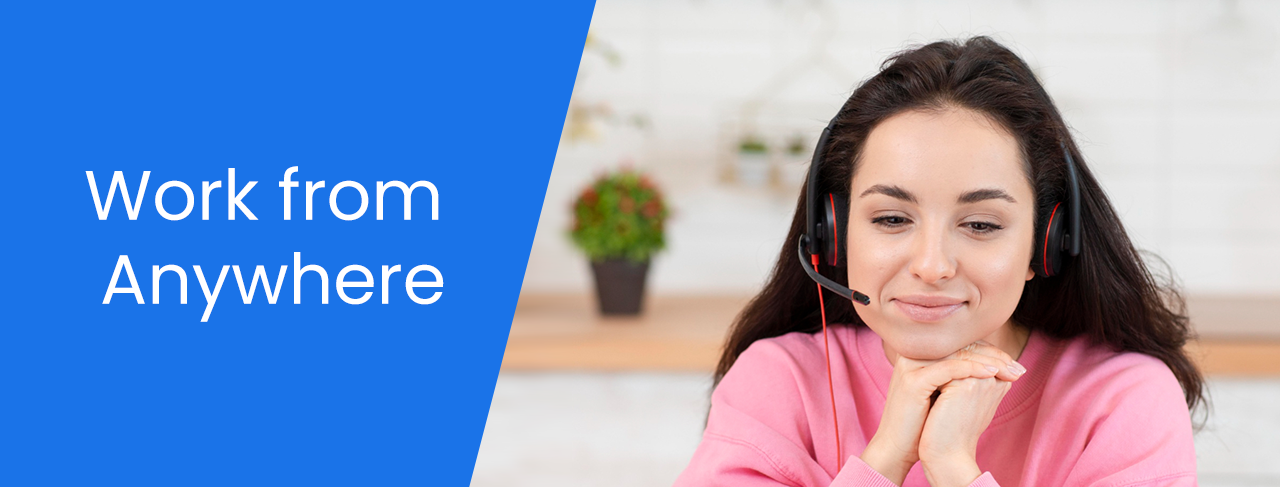
<style>
.page{position:relative;width:1280px;height:487px;background:#1a73e8}
.page>*{position:absolute;margin:0}
.t1{font:70px "Poppins-Regular";color:#ffffff}
</style>
<div class="page">
<p class="t1" style="left:85px;top:166px;width:359px;height:156px;text-align:center">Work from <br>Anywhere</p>
</div>
